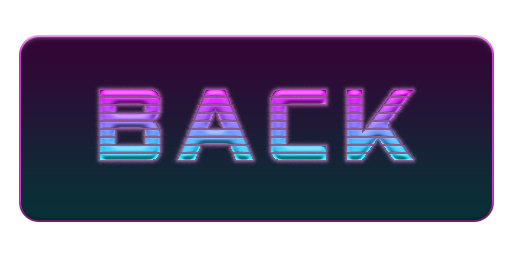
<style>
.page{position:relative;width:512px;height:256px;background:#ffffff}
.page>*{position:absolute;margin:0}
.t1{font:100px "AlienEncounters";letter-spacing:0.15em}
</style>
<div class="page">
<p class="t1" style="left:100px;top:90px;width:313px;height:70px">BACK</p>
</div>
